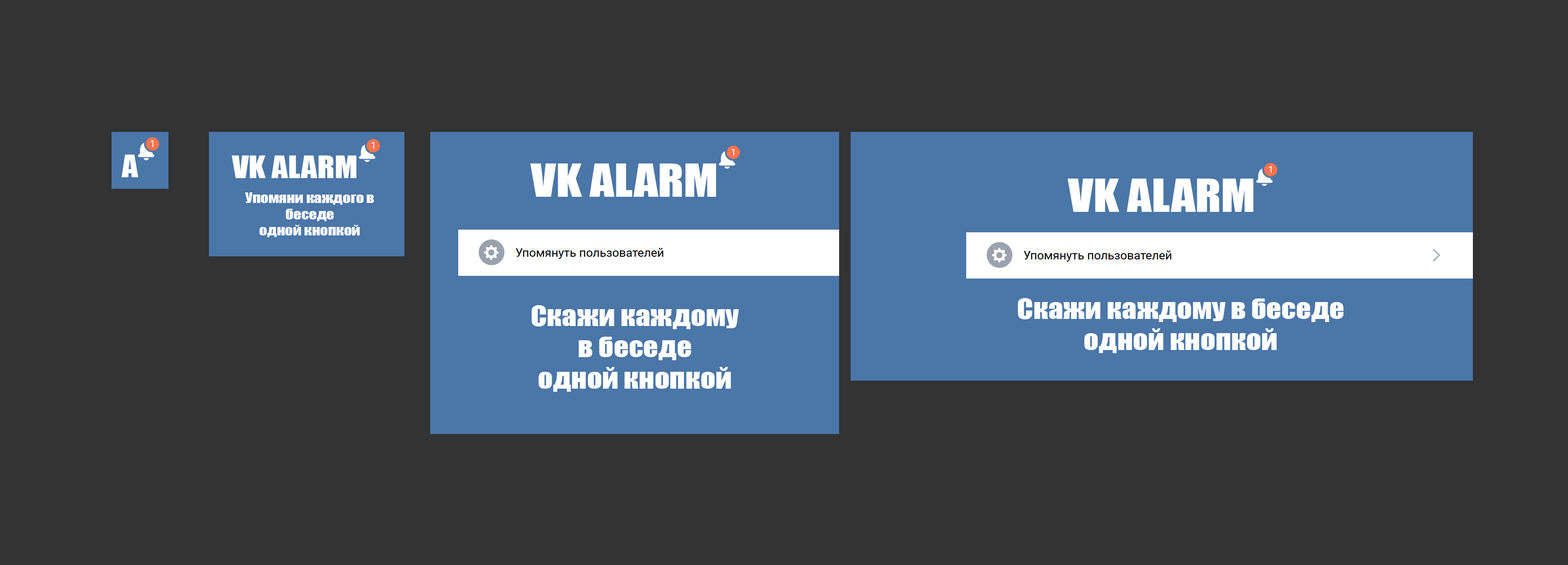
<style>
.page{position:relative;width:1568px;height:565px;background:#333333}
.page>*{position:absolute;margin:0}
.t1{font:28.3px "Impact";color:#ffffff;scale:1.14 1}
.t2{font:42.1px "Impact";color:#ffffff;scale:1.14 1}
.t3{font:13.5px "Impact";color:#ffffff;scale:1.14 1}
.t4{font:26px "Impact";color:#ffffff;scale:1.14 1}
</style>
<div class="page">
<p class="t1" style="left:121px;top:155px;width:17px;height:22px">A</p>
<p class="t1" style="left:232px;top:156px;width:124px;height:22px">VK ALARM</p>
<p class="t2" style="left:530px;top:164px;width:186px;height:33px">VK ALARM</p>
<p class="t2" style="left:1068px;top:179px;width:186px;height:33px">VK ALARM</p>
<p class="t3" style="left:245px;top:192px;width:129px;height:45px;text-align:center">Упомяни каждого в беседе <br>одной кнопкой</p>
<p class="t4" style="left:532px;top:305px;width:207px;height:87px;text-align:center">Скажи каждому в беседе <br>одной кнопкой</p>
<p class="t4" style="left:1018px;top:298px;width:326px;height:55px;text-align:center">Скажи каждому в беседе <br>одной кнопкой</p>
</div>
